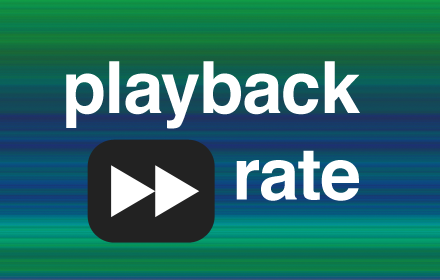
<style>
.page{position:relative;width:440px;height:280px}
.page>*{position:absolute;margin:0}
.t1{font:72px "Helvetica-Bold";color:#ffffff}
</style>
<div class="page">
<p class="t1" style="left:66px;top:61px;width:294px;height:140px;text-align:right">playback<br>rate</p>
</div>
